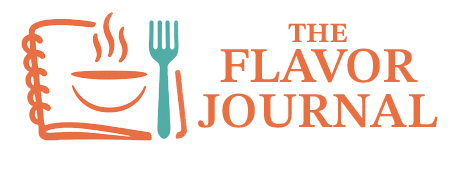
<style>
.page{position:relative;width:455px;height:169px;background:#ffffff}
.page>*{position:absolute;margin:0}
.t1{font:27.6px "STIXTwoTextRoman-Bold";color:#e96f41}
.t2{font:50px/45.6px "STIXTwoTextRoman-SemiBold";color:#e96f41}
</style>
<div class="page">
<p class="t1" style="left:288px;top:23px;width:59px;height:19px">THE</p>
<p class="t2" style="left:198px;top:48px;width:240px;height:80px;text-align:center">FLAVOR<br>JOURNAL</p>
</div>
